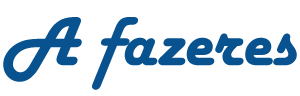
<style>
.page{position:relative;width:300px;height:96px;background:#ffffff}
.page>*{position:absolute;margin:0}
.t1{font:72.3px "HarlowSolid";color:#07528f}
</style>
<div class="page">
<p class="t1" style="left:3px;top:17px;width:294px;height:73px">A fazeres</p>
</div>
